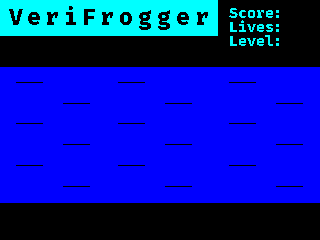
<style>
.page{position:relative;width:320px;height:240px;background:#0000ff}
.page>*{position:absolute;margin:0}
.t1{font:23.1px "FiraCode-Bold";letter-spacing:0.2em;color:#000000}
.t2{font:14.9px "FiraCode-Bold";color:#00ffff}
</style>
<div class="page">
<p class="t1" style="left:9px;top:6px;width:199px;height:24px">VeriFrogger</p>
<p class="t2" style="left:229px;top:8px;width:50px;height:10px">Score:</p>
<p class="t2" style="left:230px;top:20px;width:49px;height:12px">Lives:</p>
<p class="t2" style="left:230px;top:35px;width:49px;height:11px">Level:</p>
</div>
